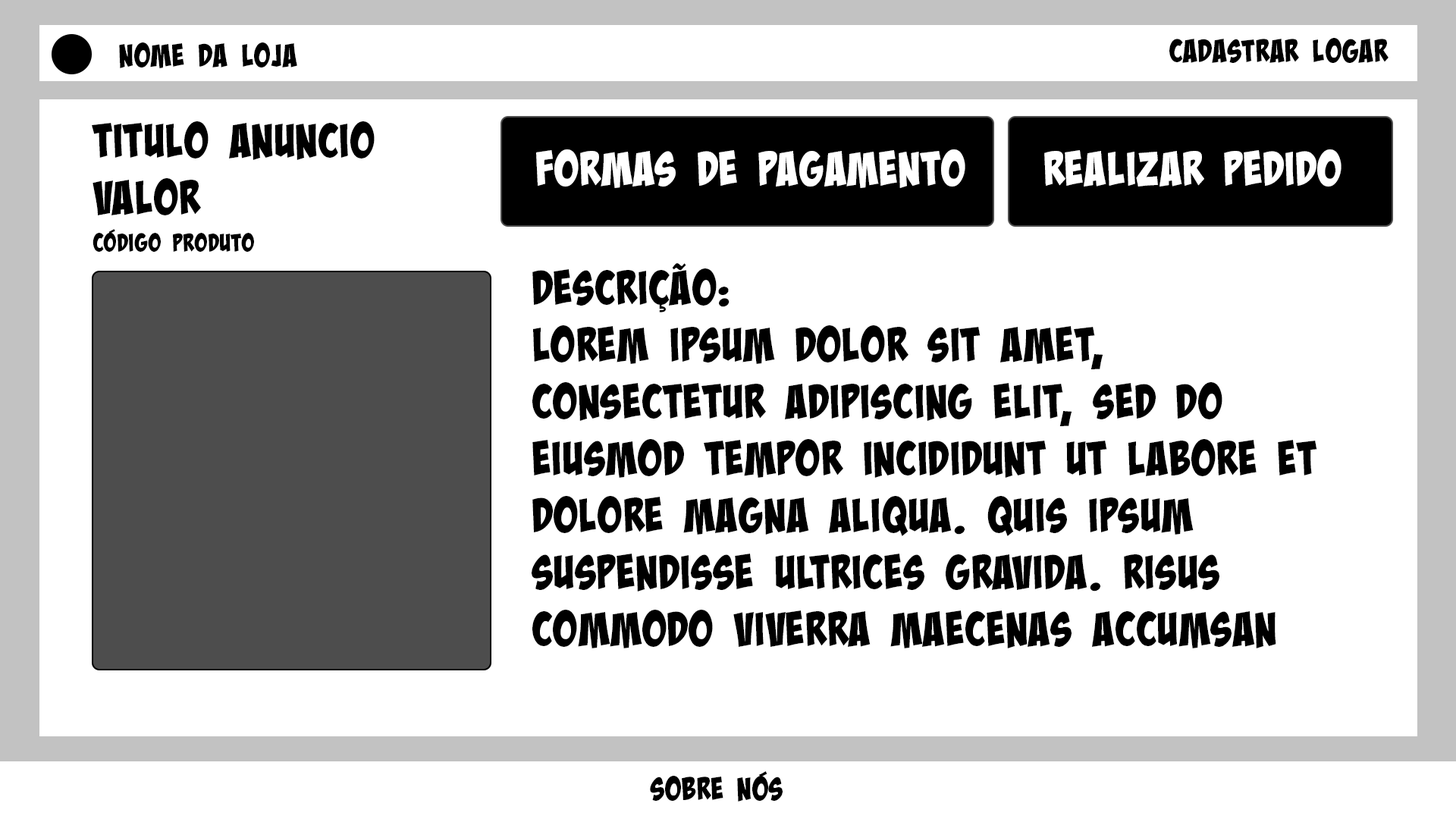
<style>
.page{position:relative;width:1456px;height:819px;background:#ffffff}
.page>*{position:absolute;margin:0}
.t1{font:31.6px "BadaBoomProBB";color:#000000}
.t2{font:47.4px "BadaBoomProBB";color:#000000}
.t3{font:47.4px "BadaBoomProBB";color:#ffffff}
.t4{font:25.3px "BadaBoomProBB";color:#000000}
</style>
<div class="page">
<p class="t1" style="left:1169px;top:38px;width:219px;height:25px">Cadastrar Logar</p>
<p class="t1" style="left:119px;top:42px;width:178px;height:26px">NOME DA LOJA</p>
<p class="t2" style="left:92px;top:121px;width:283px;height:94px">Titulo anuncio<br>Valor</p>
<p class="t3" style="left:536px;top:149px;width:429px;height:39px">Formas de pagamento</p>
<p class="t3" style="left:1044px;top:149px;width:297px;height:38px">realizar pedido</p>
<p class="t4" style="left:93px;top:229px;width:161px;height:23px">Código produto</p>
<p class="t2" style="left:532px;top:263px;width:785px;height:385px">Descrição:<br>Lorem ipsum dolor sit amet, consectetur adipiscing elit, sed do eiusmod tempor incididunt ut labore et dolore magna aliqua. Quis ipsum suspendisse ultrices gravida. Risus commodo viverra maecenas accumsan lacus vel facilisis.</p>
<p class="t1" style="left:650px;top:771px;width:133px;height:31px">Sobre nós</p>
</div>
